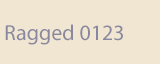
<style>
.page{position:relative;width:160px;height:64px;background:#f0e6d2}
.page>*{position:absolute;margin:0}
.t1{font:22px "MyriadPro-Regular";color:#8988a0}
</style>
<div class="page">
<p class="t1" style="left:5px;top:24px;width:118px;height:21px">Ragged 0123</p>
</div>
